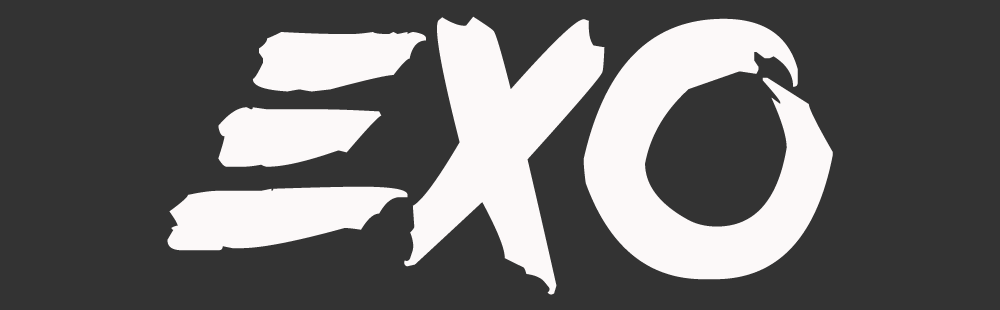
<style>
.page{position:relative;width:1000px;height:310px;background:#333333}
.page>*{position:absolute;margin:0}
.t1{font:600px "KillTheNoise";color:#fcf9f9}
</style>
<div class="page">
<p class="t1" style="left:167px;top:16px;width:666px;height:279px">EXO</p>
</div>
